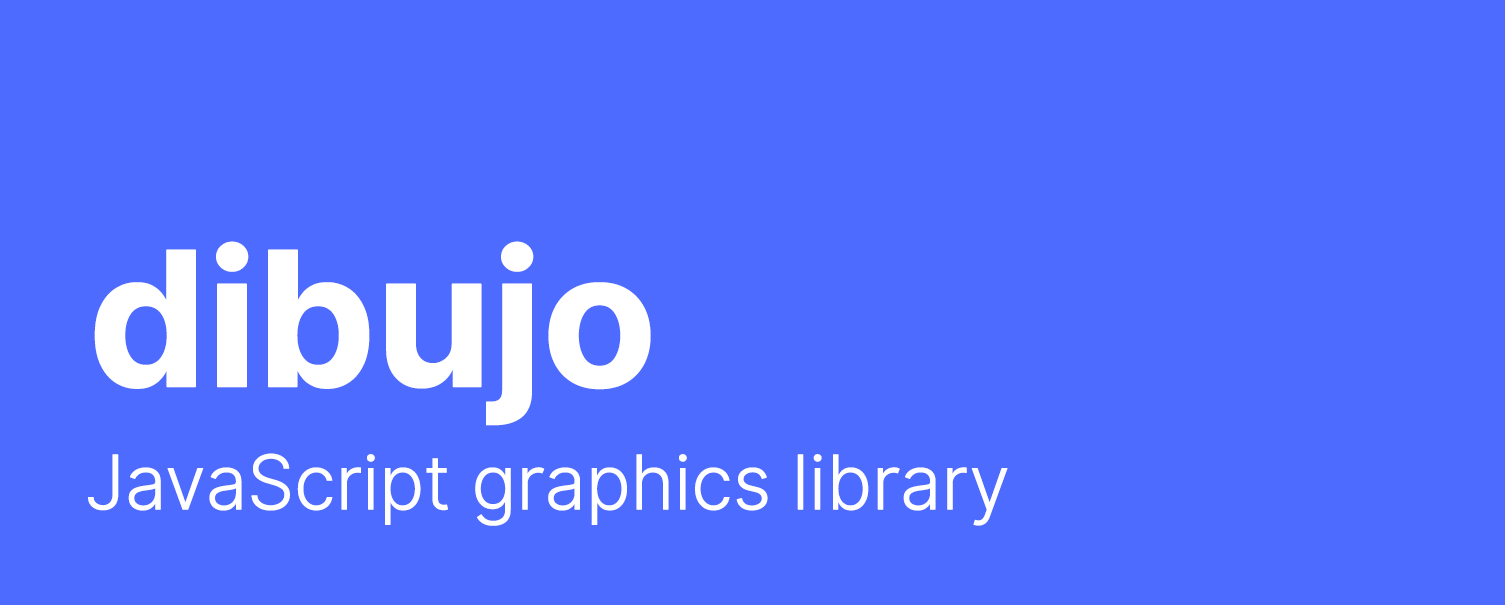
<style>
.page{position:relative;width:1505px;height:605px;background:#4e6bff}
.page>*{position:absolute;margin:0}
.t1{font:187.5px "Inter-Bold";letter-spacing:-0.03em;color:#ffffff;font-weight:bold}
.t2{font:75px "Inter-LightBETA";letter-spacing:-0.03em;color:#ffffff;font-weight:bold}
</style>
<div class="page">
<p class="t1" style="left:94px;top:241px;width:557px;height:185px">dibujo</p>
<p class="t2" style="left:88px;top:453px;width:920px;height:73px">JavaScript graphics library</p>
</div>
